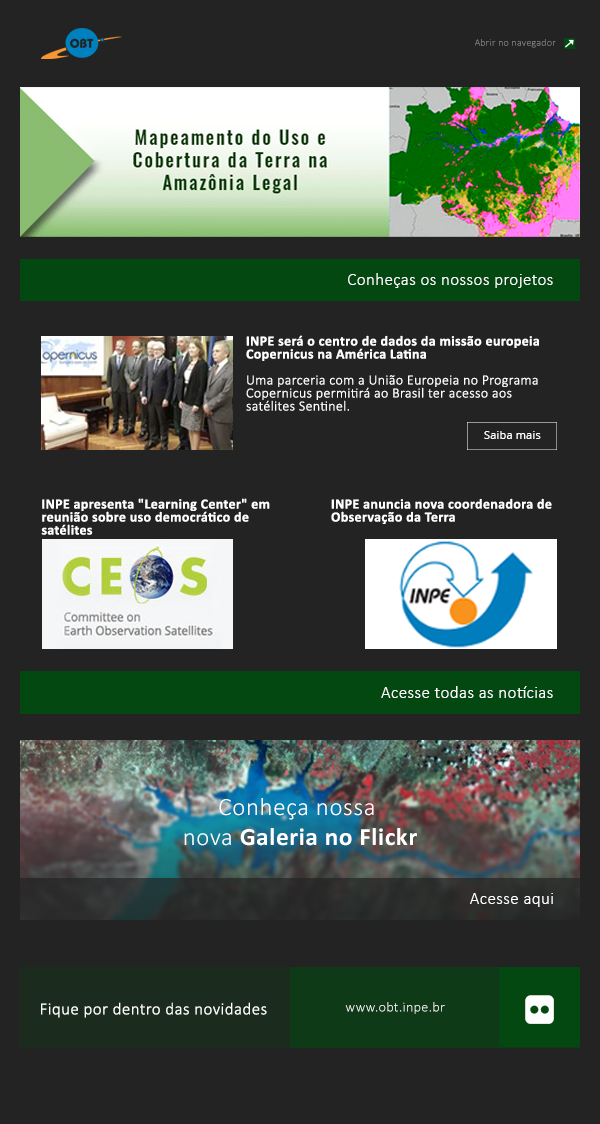
<style>
.page{position:relative;width:600px;height:1124px;background:#232323}
.page>*{position:absolute;margin:0}
.t1{font:10px "Calibri-Light";letter-spacing:0.025em;color:#979595}
.t2{font:17px "Calibri-Light";letter-spacing:0.025em;color:#ffffff}
.t3{font:14px/13px "Calibri-Light";letter-spacing:0.025em;color:#ffffff}
.t4{font:14px/13px "Calibri-Bold";letter-spacing:0.025em;color:#ffffff}
.t5{font:10.8px "OpenSans";letter-spacing:0.025em;color:#ffffff}
.t6{font:25px "Calibri-Light";letter-spacing:0.025em;color:#ffffff}
.t7{font:25px "Calibri-Bold";letter-spacing:0.025em;color:#ffffff}
.t8{font:14px "Calibri-Light";letter-spacing:0.025em;color:#ffffff}
</style>
<div class="page">
<p class="t1" style="left:475px;top:39px;width:81px;height:9px">Abrir no navegador</p>
<p class="t2" style="left:348px;top:273px;width:205px;height:15px">Conheças os nossos projetos</p>
<p class="t3" style="left:246px;top:335px;width:293px;height:76px"><span class="t4">INPE será o centro de dados da missão europeia Copernicus na América Latina<br><br></span>Uma parceria com a União Europeia no Programa Copernicus permitirá ao Brasil ter acesso aos satélites Sentinel.</p>
<p class="t5" style="left:484px;top:431px;width:57px;height:8px">Saiba mais</p>
<p class="t4" style="left:41px;top:498px;width:229px;height:37px">INPE apresenta "Learning Center" em reunião sobre uso democrático de satélites</p>
<p class="t4" style="left:331px;top:498px;width:221px;height:26px">INPE anuncia nova coordenadora de Observação da Terra</p>
<p class="t2" style="left:381px;top:686px;width:172px;height:12px">Acesse todas as notícias</p>
<p class="t6" style="left:184px;top:798px;width:233px;height:48px;text-align:center">Conheça nossa <br>nova <span class="t7">Galeria no Flickr</span></p>
<p class="t2" style="left:470px;top:893px;width:83px;height:14px">Acesse aqui</p>
<p class="t2" style="left:41px;top:1002px;width:226px;height:16px">Fique por dentro das novidades</p>
<p class="t8" style="left:345px;top:1002px;width:100px;height:12px">www.obt.inpe.br</p>
</div>
